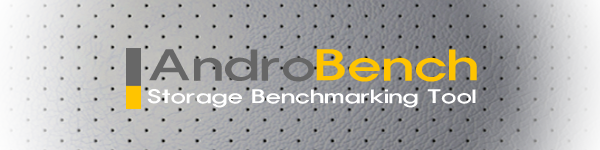
<style>
.page{position:relative;width:600px;height:150px}
.page>*{position:absolute;margin:0}
.t1{font:19.3px "HaanYHeadM";color:#ffffff;scale:1.3 1}
.t2{font:43.4px "HaanYHeadM";color:#666666;scale:1.3 1}
.t3{font:43.4px "HaanYHeadM";color:#ffc400;scale:1.3 1}
</style>
<div class="page">
<p class="t1" style="left:147px;top:49px;width:330px;height:59px"><span class="t2">Andro</span><span class="t3">Bench<br></span>Storage Benchmarking Tool</p>
</div>
